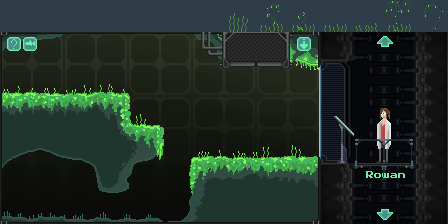
<style>
.page{position:relative;width:448px;height:224px}
.page>*{position:absolute;margin:0}
.t1{font:8px "PressStart2P";color:#69efab}
</style>
<div class="page">
<p class="t1" style="left:366px;top:171px;width:39px;height:7px">Rowan</p>
</div>
